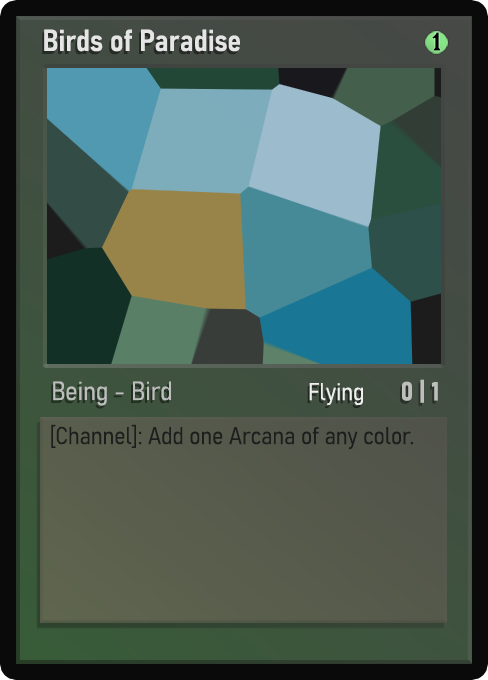
<style>
.page{position:relative;width:488px;height:680px}
.page>*{position:absolute;margin:0}
.t1{font:30px "Bahnschrift-SemiBoldSemiCondensed";color:#f2f2f2;font-weight:bold}
.t2{font:25px "WTRRoycroft";color:#000000;font-weight:bold;scale:1.09 1}
.t3{font:26px "Bahnschrift-LightSemiCondensed";color:#c8c8c8;font-weight:bold}
.t4{font:24px "Bahnschrift-LightSemiCondensed";color:#f0efef;font-weight:bold}
.t5{font:26px "Bahnschrift-BoldSemiCondensed";color:#bdbfbd;font-weight:bold}
.t6{font:24px "Bahnschrift-LightSemiCondensed";color:#1e1e1e;font-weight:bold}
</style>
<div class="page">
<p class="t1" style="left:44px;top:29px;width:196px;height:23px;opacity:0.9">Birds of Paradise</p>
<p class="t2" style="left:432px;top:32px;width:9px;height:19px">1</p>
<p class="t3" style="left:53px;top:381px;width:118px;height:25px;opacity:0.9">Being - Bird</p>
<p class="t4" style="left:309px;top:383px;width:54px;height:23px">Flying</p>
<p class="t5" style="left:402px;top:379px;width:36px;height:24px">0 | 1</p>
<p class="t6" style="left:51px;top:424px;width:362px;height:26px">[Channel]: Add one Arcana of any color.</p>
</div>
